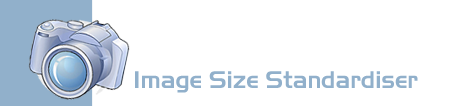
<style>
.page{position:relative;width:453px;height:106px;background:#ffffff}
.page>*{position:absolute;margin:0}
.t1{font:24px "Slicker";color:#91b0cb}
</style>
<div class="page">
<p class="t1" style="left:135px;top:71px;width:283px;height:22px">Image Size Standardiser</p>
</div>
